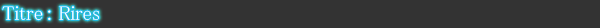
<style>
.page{position:relative;width:600px;height:28px;background:#333333}
.page>*{position:absolute;margin:0}
.t1{font:20px "MS-PMincho";color:#ffffff}
</style>
<div class="page">
<p class="t1" style="left:2px;top:6px;width:98px;height:15px">Titre : Rires</p>
</div>
